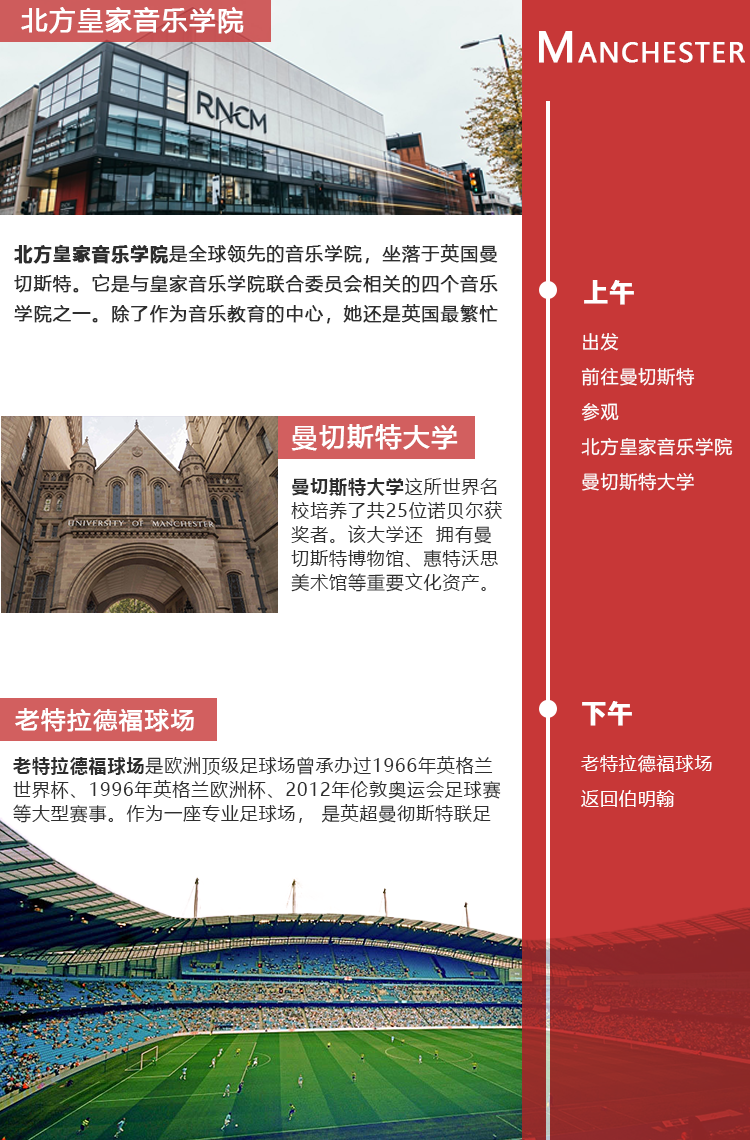
<style>
.page{position:relative;width:750px;height:1140px;background:#ffffff}
.page>*{position:absolute;margin:0}
.t1{font:26px "MicrosoftYaHei";letter-spacing:0.05em;color:#ffffff;font-weight:bold}
.t2{font:25.6px "MicrosoftYaHei";letter-spacing:0.05em;color:#ffffff;font-weight:bold}
.t3{font:41px "MicrosoftYaHei";letter-spacing:0.05em;color:#ffffff;font-weight:bold}
.t4{font:18px/30px "MicrosoftYaHei";letter-spacing:0.05em;color:#2e2e2e;font-weight:bold}
.t5{font:18px/30px "MicrosoftYaHei-Bold";letter-spacing:0.05em;color:#2e2e2e;font-weight:bold}
.t6{font:24px "MicrosoftYaHei-Bold";letter-spacing:0.05em;color:#ffffff;font-weight:bold}
.t7{font:18px/35px "MicrosoftYaHei";letter-spacing:0.05em;color:#ffffff}
.t8{font:18px/24px "MicrosoftYaHei";letter-spacing:0.05em;color:#2e2e2e}
.t9{font:18px/24px "MicrosoftYaHei-Bold";letter-spacing:0.05em;color:#2e2e2e}
.t10{font:24px "MicrosoftYaHei";letter-spacing:0.05em;color:#ffffff;font-weight:bold}
</style>
<div class="page">
<p class="t1" style="left:21px;top:7px;width:223px;height:27px">北方皇家音乐学院</p>
<p class="t2" style="left:539px;top:31px;width:206px;height:32px"><span class="t3">M</span>ANCHESTER</p>
<p class="t4" style="left:14px;top:244px;width:484px;height:80px"><span class="t5">北方皇家音乐学院</span>是全球领先的音乐学院，坐落于英国曼切斯特。它是与皇家音乐学院联合委员会相关的四个音乐学院之一。除了作为音乐教育的中心，她还是英国最繁忙的表演场馆之一。</p>
<p class="t6" style="left:584px;top:280px;width:50px;height:25px">上午</p>
<p class="t7" style="left:581px;top:333px;width:152px;height:158px">出发<br>前往曼切斯特<br>参观<br>北方皇家音乐学院<br>曼切斯特大学</p>
<p class="t1" style="left:291px;top:424px;width:167px;height:27px">曼切斯特大学</p>
<p class="t8" style="left:291px;top:478px;width:211px;height:114px"><span class="t9">曼切斯特大学</span>这所世界名校培养了共25位诺贝尔获奖者。该大学还  拥有曼切斯特博物馆、惠特沃思美术馆等重要文化资产。</p>
<p class="t6" style="left:582px;top:701px;width:50px;height:25px">下午</p>
<p class="t10" style="left:15px;top:708px;width:179px;height:24px">老特拉德福球场</p>
<p class="t8" style="left:13px;top:756px;width:488px;height:67px"><span class="t9">老特拉德福球场</span>是欧洲顶级足球场曾承办过1966年英格兰世界杯、1996年英格兰欧洲杯、2012年伦敦奥运会足球赛等大型赛事。作为一座专业足球场， 是英超曼彻斯特联足球俱乐部的主场，被誉为“梦剧场”。</p>
<p class="t7" style="left:581px;top:755px;width:131px;height:52px">老特拉德福球场<br>返回伯明翰</p>
</div>
